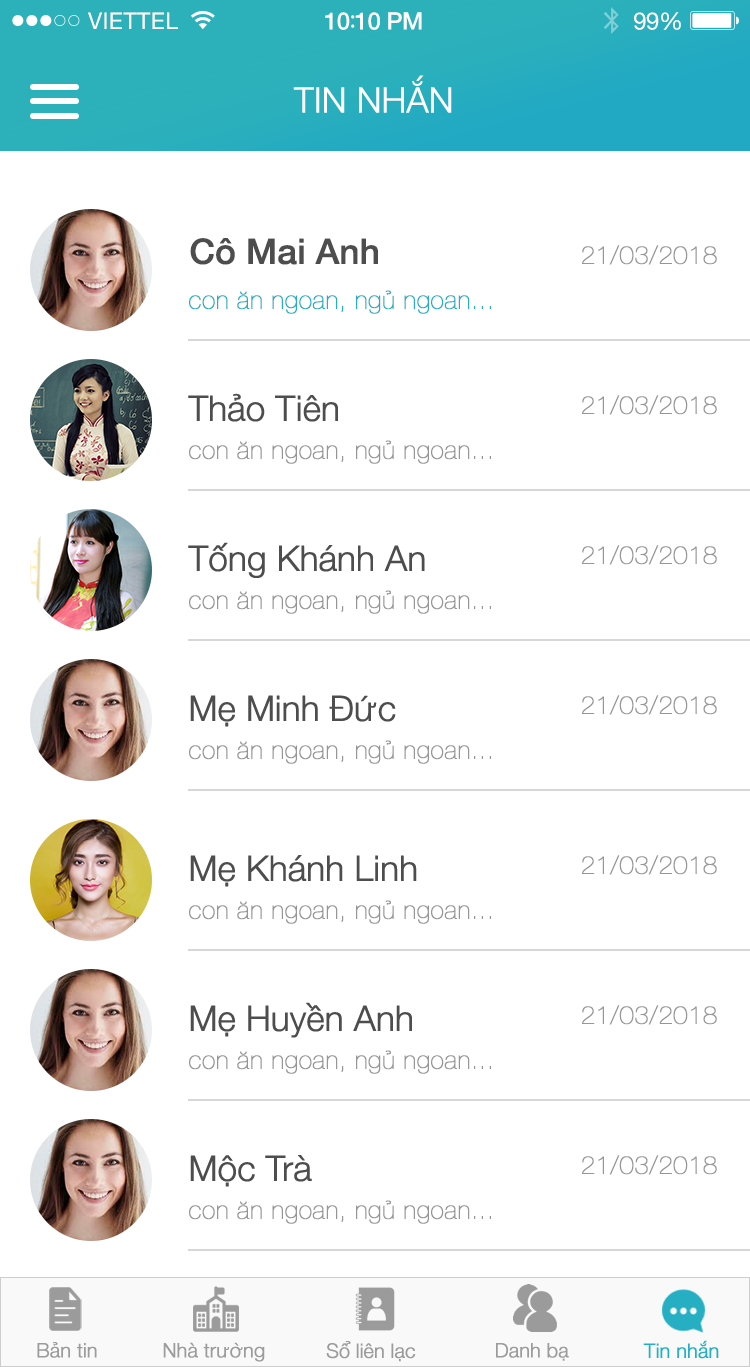
<style>
.page{position:relative;width:750px;height:1367px;background:#ffffff}
.page>*{position:absolute;margin:0}
.t1{font:23px "HelveticaNeue";letter-spacing:0.02em;color:#ffffff}
.t2{font:24px "HelveticaNeue-Medium";letter-spacing:-0.02em;color:#ffffff}
.t3{font:26px "MyriadPro-Regular";letter-spacing:-0.02em;color:#ffffff}
.t4{font:24px "HelveticaNeue";letter-spacing:-0.02em;color:#ffffff}
.t5{font:35px "HelveticaNeue-Light";letter-spacing:-0.02em;color:#ffffff;font-weight:bold}
.t6{font:35px "HelveticaNeue-Medium";letter-spacing:-0.02em;color:#4d4d4d;font-weight:bold}
.t7{font:25px "HelveticaNeue-UltraLight";letter-spacing:0.01em;color:#969696;font-weight:bold}
.t8{font:25px "HelveticaNeue-UltraLight";letter-spacing:0.01em;color:#26afc2;font-weight:bold}
.t9{font:35px "HelveticaNeue-Light";letter-spacing:-0.02em;color:#4d4d4d;font-weight:bold}
.t10{font:25px "HelveticaNeue-UltraLight";letter-spacing:0.01em;color:#959595;font-weight:bold}
.t11{font:20px "HelveticaNeue-Light";letter-spacing:-0.02em;color:#9b9b9b;font-weight:bold}
.t12{font:20px "HelveticaNeue-Light";letter-spacing:-0.02em;color:#26afc2;font-weight:bold}
</style>
<div class="page">
<p class="t1" style="left:88px;top:12px;width:90px;height:17px">VIETTEL</p>
<p class="t2" style="left:325px;top:12px;width:97px;height:18px">10<span class="t3">:</span>10 PM</p>
<p class="t4" style="left:634px;top:12px;width:47px;height:18px">99%</p>
<p class="t5" style="left:293px;top:75px;width:159px;height:38px">TIN NHẮN</p>
<p class="t6" style="left:190px;top:238px;width:188px;height:27px">Cô Mai Anh</p>
<p class="t7" style="left:582px;top:245px;width:135px;height:20px">21/03/2018</p>
<p class="t8" style="left:189px;top:290px;width:302px;height:24px">con ăn ngoan, ngủ ngoan...</p>
<p class="t9" style="left:188px;top:393px;width:150px;height:29px">Thảo Tiên</p>
<p class="t7" style="left:582px;top:395px;width:135px;height:20px">21/03/2018</p>
<p class="t10" style="left:189px;top:440px;width:302px;height:24px">con ăn ngoan, ngủ ngoan...</p>
<p class="t9" style="left:188px;top:542px;width:237px;height:36px">Tống Khánh An</p>
<p class="t7" style="left:582px;top:545px;width:135px;height:20px">21/03/2018</p>
<p class="t10" style="left:189px;top:590px;width:302px;height:24px">con ăn ngoan, ngủ ngoan...</p>
<p class="t9" style="left:190px;top:695px;width:206px;height:32px">Mẹ Minh Đức</p>
<p class="t7" style="left:582px;top:695px;width:135px;height:20px">21/03/2018</p>
<p class="t10" style="left:189px;top:740px;width:302px;height:24px">con ăn ngoan, ngủ ngoan...</p>
<p class="t9" style="left:190px;top:855px;width:227px;height:32px">Mẹ Khánh Linh</p>
<p class="t7" style="left:582px;top:855px;width:135px;height:20px">21/03/2018</p>
<p class="t10" style="left:189px;top:900px;width:302px;height:24px">con ăn ngoan, ngủ ngoan...</p>
<p class="t9" style="left:190px;top:1002px;width:222px;height:36px">Mẹ Huyền Anh</p>
<p class="t7" style="left:582px;top:1005px;width:135px;height:20px">21/03/2018</p>
<p class="t10" style="left:189px;top:1050px;width:302px;height:24px">con ăn ngoan, ngủ ngoan...</p>
<p class="t9" style="left:190px;top:1155px;width:122px;height:32px">Mộc Trà</p>
<p class="t7" style="left:582px;top:1155px;width:135px;height:20px">21/03/2018</p>
<p class="t10" style="left:189px;top:1200px;width:302px;height:24px">con ăn ngoan, ngủ ngoan...</p>
<p class="t11" style="left:37px;top:1342px;width:60px;height:16px">Bản tin</p>
<p class="t11" style="left:163px;top:1342px;width:102px;height:20px">Nhà trường</p>
<p class="t11" style="left:326px;top:1341px;width:90px;height:21px">Sổ liên lạc</p>
<p class="t11" style="left:496px;top:1343px;width:73px;height:18px">Danh bạ</p>
<p class="t12" style="left:643px;top:1340px;width:76px;height:19px">Tin nhắn</p>
</div>
